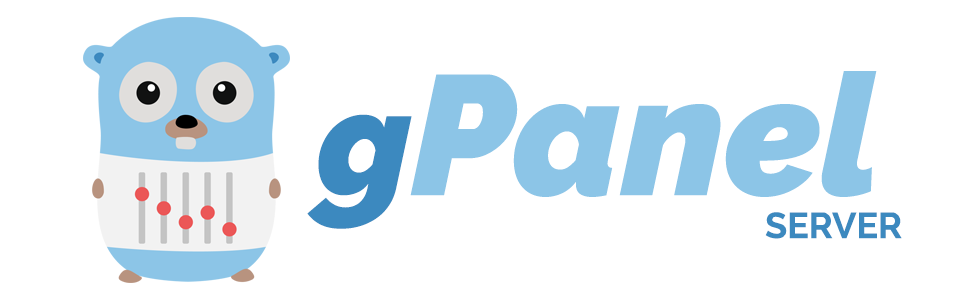
<style>
.page{position:relative;width:960px;height:300px;background:#ffffff}
.page>*{position:absolute;margin:0}
.t1{font:170px "Raleway-BlackItalic";color:#8cc5e7}
.t2{font:150px "Raleway-BlackItalic";color:#3c89bf}
.t3{font:36px "Raleway-Bold";color:#3c89bf}
</style>
<div class="page">
<p class="t1" style="left:307px;top:71px;width:570px;height:158px"><span class="t2">g</span>Panel</p>
<p class="t3" style="left:765px;top:212px;width:137px;height:27px">SERVER</p>
</div>
